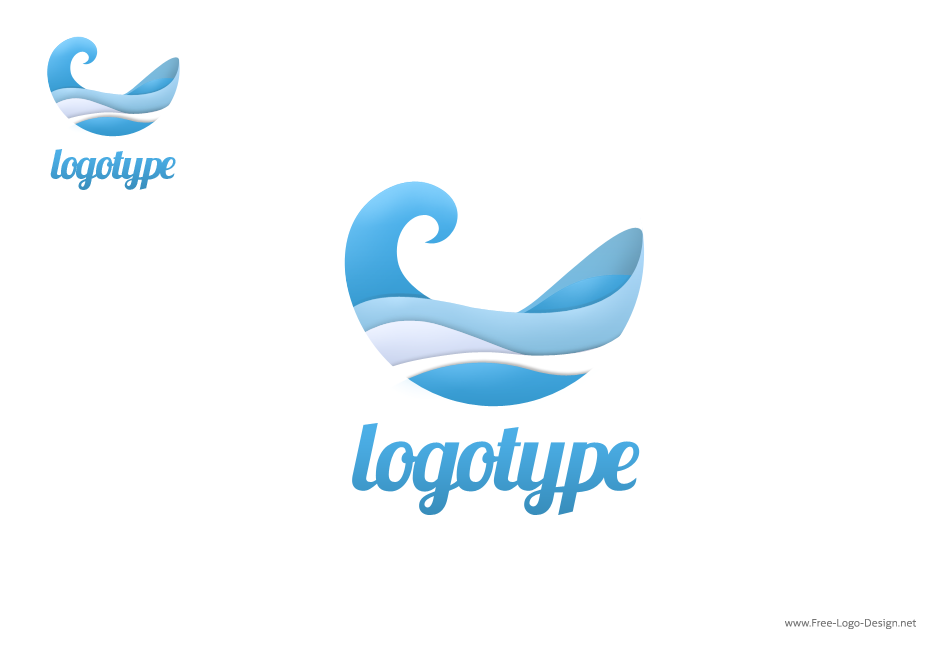
<style>
.page{position:relative;width:936px;height:649px;background:#ffffff}
.page>*{position:absolute;margin:0}
.t1{font:42.9px "Lobster1.3";letter-spacing:-0.06em;color:#43a1d6}
</style>
<div class="page">
<p class="t1" style="left:50px;top:149px;width:126px;height:41px">logotype</p>
</div>
